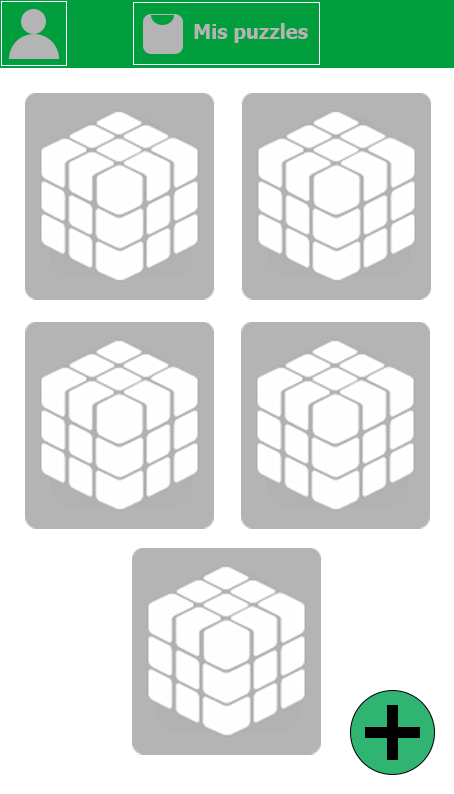
<style>
.page{position:relative;width:454px;height:794px;background:#ffffff}
.page>*{position:absolute;margin:0}
.t1{font:20px "Tahoma-Bold";color:#b4b4b4}
</style>
<div class="page">
<p class="t1" style="left:194px;top:23px;width:114px;height:20px">Mis puzzles</p>
</div>
